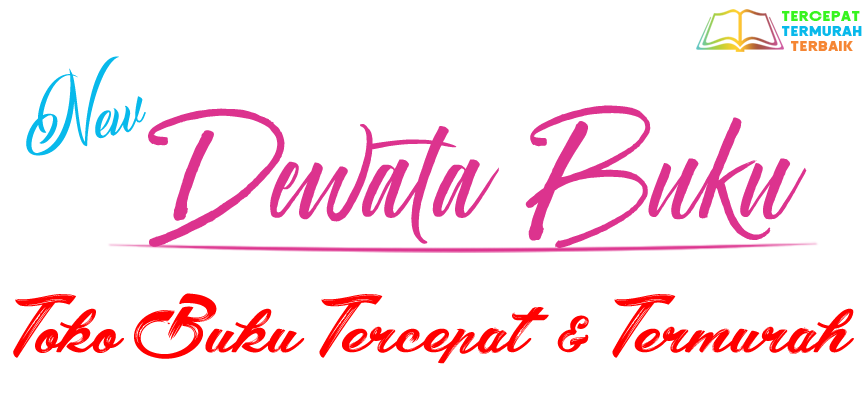
<style>
.page{position:relative;width:866px;height:396px;background:#ffffff}
.page>*{position:absolute;margin:0}
.t1{font:15.4px "FeedingaMoment";letter-spacing:0.06em;color:#37f41e;scale:1.2 1}
.t2{font:15.4px "FeedingaMoment";letter-spacing:0.06em;color:#08b9eb;scale:1.2 1}
.t3{font:15.4px "FeedingaMoment";letter-spacing:0.06em;color:#f58634;scale:1.2 1}
.t4{font:45.8px "MonCherryPersonalUse";color:#08b9eb}
.t5{font:141.5px "CrownHeights";color:#dc338e}
.t6{font:83.3px "Shania&HeinzPersonalUseOnly";color:#ff0000}
</style>
<div class="page">
<p class="t1" style="left:782px;top:11px;width:78px;height:10px">TERCEPAT</p>
<p class="t2" style="left:782px;top:26px;width:80px;height:10px">TERMURAH</p>
<p class="t3" style="left:791px;top:41px;width:62px;height:10px">TERBAIK</p>
<p class="t4" style="left:26px;top:56px;width:120px;height:100px;rotate:-12deg">New</p>
<p class="t5" style="left:148px;top:105px;width:659px;height:143px">Dewata Buku</p>
<p class="t6" style="left:13px;top:293px;width:841px;height:71px">Toko Buku Tercepat &amp; Termurah</p>
</div>
